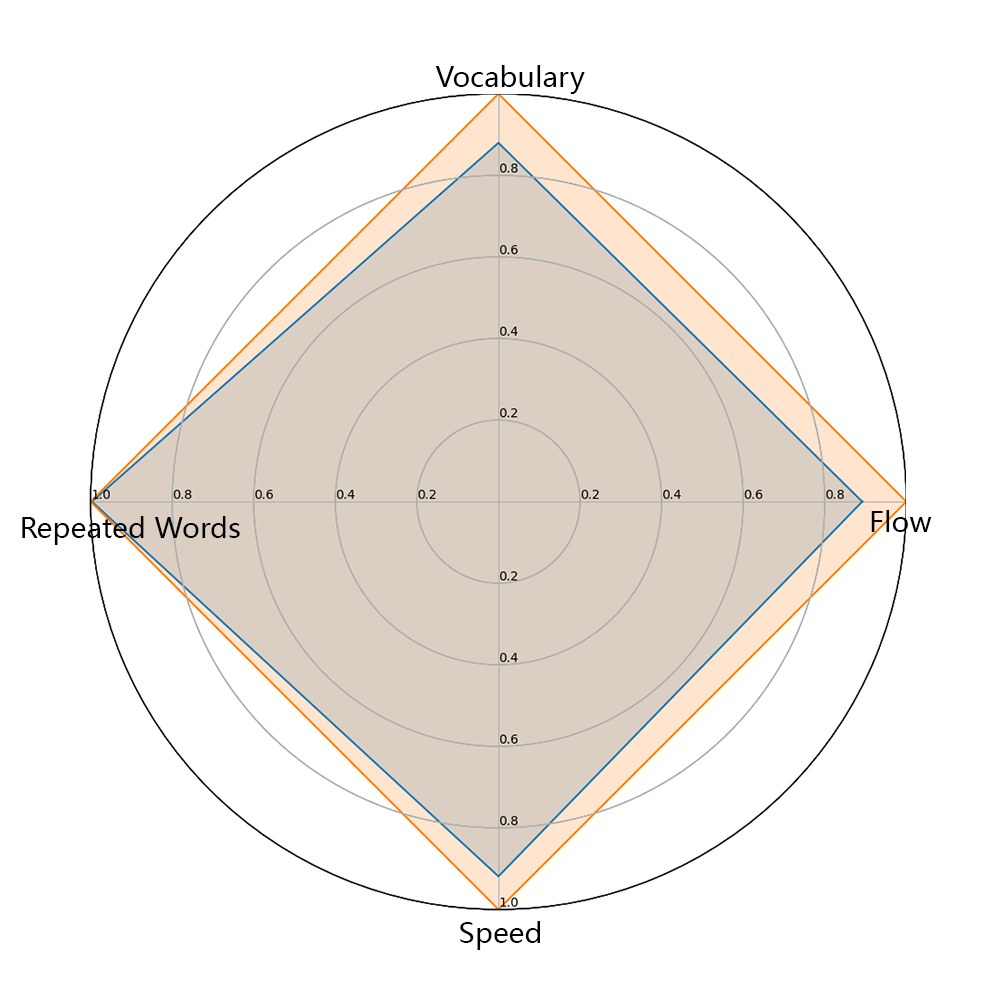
<style>
.page{position:relative;width:1000px;height:1000px;background:#ffffff}
.page>*{position:absolute;margin:0}
.t1{font:27.8px "MicrosoftYaHeiUI";letter-spacing:0.005em;color:#000000}
</style>
<div class="page">
<p class="t1" style="left:435px;top:65px;width:150px;height:29px">Vocabulary</p>
<p class="t1" style="left:871px;top:510px;width:61px;height:22px">Flow</p>
<p class="t1" style="left:22px;top:516px;width:218px;height:29px">Repeated Words</p>
<p class="t1" style="left:460px;top:921px;width:80px;height:29px">Speed</p>
</div>
